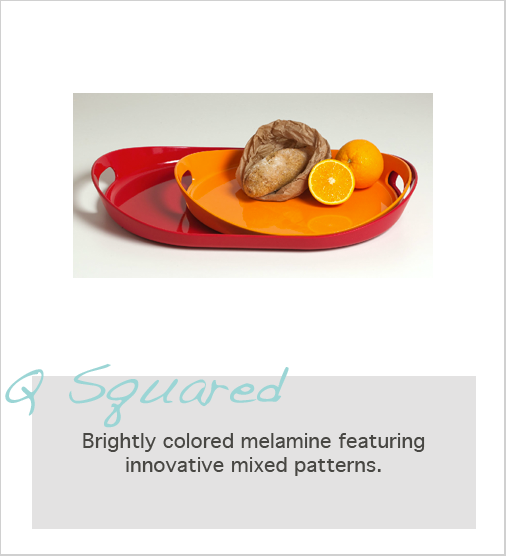
<style>
.page{position:relative;width:506px;height:556px;background:#ffffff}
.page>*{position:absolute;margin:0}
.t1{font:56px "Handwriting-Dakota";color:#9bd5d5}
.t2{font:20px "Geneva";color:#484743}
</style>
<div class="page">
<p class="t1" style="left:5px;top:363px;width:284px;height:65px">Q Squared</p>
<p class="t2" style="left:83px;top:433px;width:342px;height:43px;text-align:center">Brightly colored melamine featuring innovative mixed patterns.</p>
</div>
